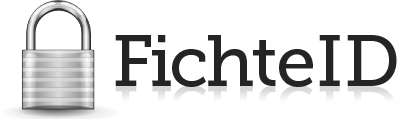
<style>
.page{position:relative;width:418px;height:119px;background:#ffffff}
.page>*{position:absolute;margin:0}
.t1{font:72px "MuseoSlab-500";color:#242424}
.t2{font:72px "MuseoSlab-500";letter-spacing:-0.06em;color:#242424}
.t3{font:72px "MuseoSlab-500";letter-spacing:-0.04em;color:#242424}
.t4{font:72px "MuseoSlab-500";letter-spacing:-0.02em;color:#242424}
</style>
<div class="page">
<p class="t1" style="left:115px;top:35px;width:282px;height:52px"><span class="t2">Fi</span><span class="t3">ch</span><span class="t4">t</span>eID</p>
</div>
